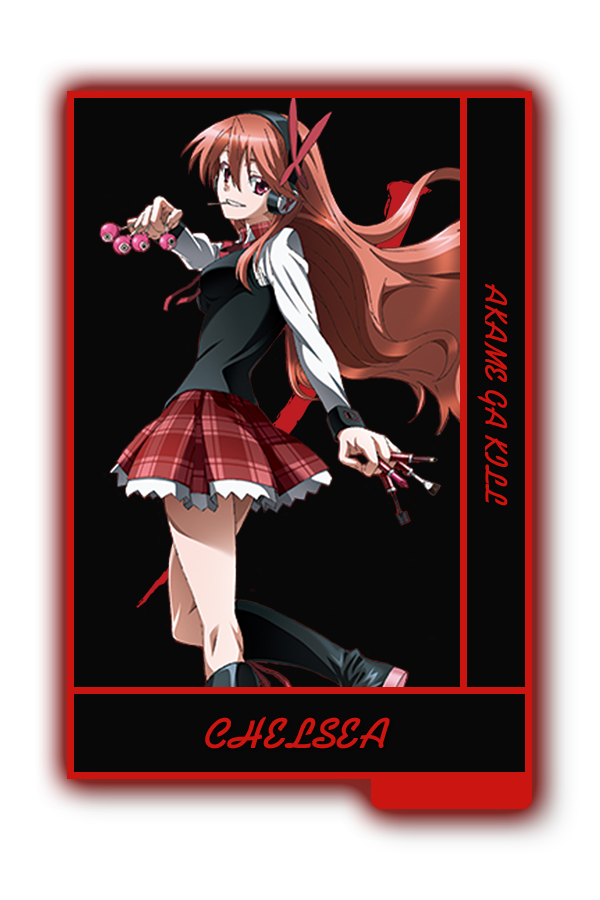
<style>
.page{position:relative;width:600px;height:900px;background:#080808}
.page>*{position:absolute;margin:0}
.t1{font:31.2px "Alako-Bold";color:#cb1511}
.t2{font:43.2px "Alako-Bold";color:#cb1511}
</style>
<div class="page">
<p class="t1" style="left:477px;top:283px;width:31px;height:223px;rotate:90deg">AKAME GA KILL</p>
<p class="t2" style="left:205px;top:716px;width:185px;height:33px">CHELSEA</p>
</div>
